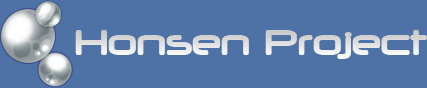
<style>
.page{position:relative;width:427px;height:88px;background:#4f72a6}
.page>*{position:absolute;margin:0}
.t1{font:40px "NeuropolBold";color:#e1e1e1}
</style>
<div class="page">
<p class="t1" style="left:75px;top:30px;width:352px;height:29px">Honsen Project</p>
</div>
